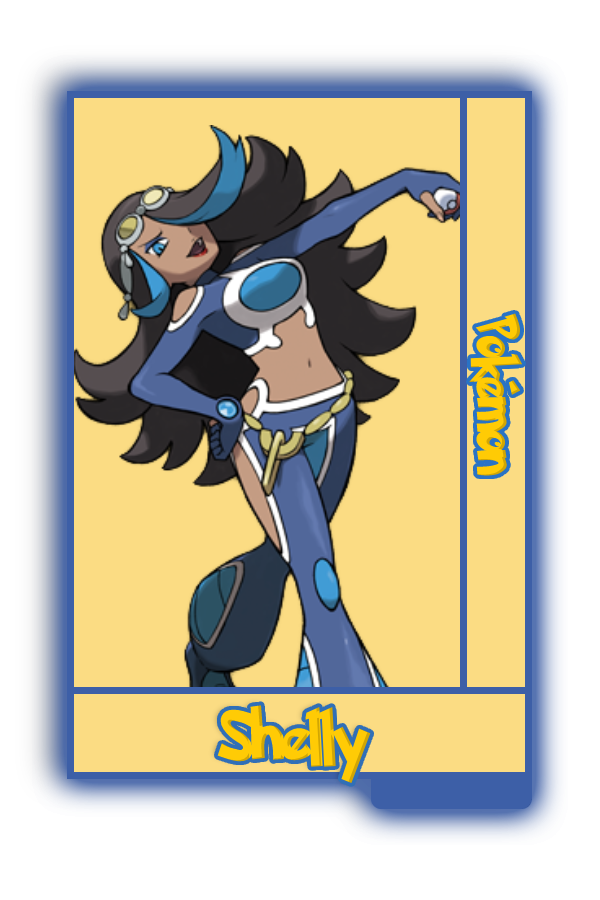
<style>
.page{position:relative;width:600px;height:900px;background:#fbdc83}
.page>*{position:absolute;margin:0}
.t1{font:48.8px "PokemonSolidNormal";color:#ffcb05;scale:0.8 1}
.t2{font:56.6px "PokemonSolidNormal";color:#ffcb05;scale:0.92 1}
</style>
<div class="page">
<p class="t1" style="left:469px;top:313px;width:54px;height:163px;rotate:90deg">Pokémon</p>
<p class="t2" style="left:217px;top:705px;width:154px;height:78px">Shelly</p>
</div>
